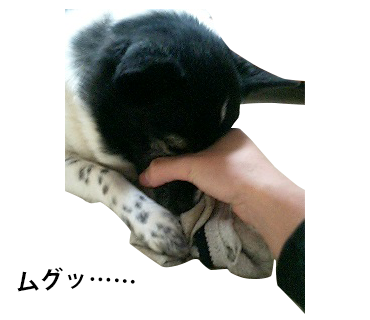
<style>
.page{position:relative;width:370px;height:320px;background:#ffffff}
.page>*{position:absolute;margin:0}
.t1{font:24px "KozGoPr6N-Bold";color:#000000}
</style>
<div class="page">
<p class="t1" style="left:17px;top:267px;width:118px;height:25px">ムグッ……</p>
</div>
